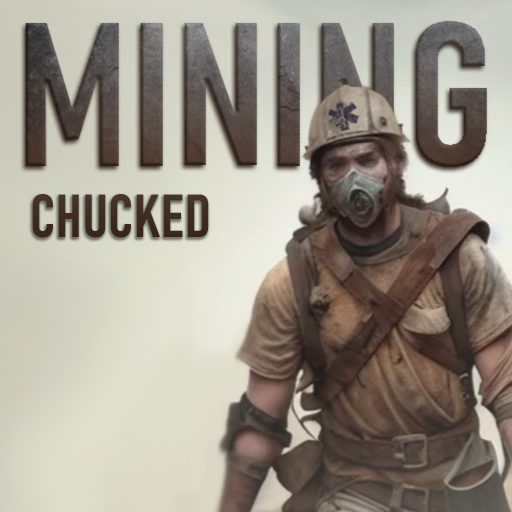
<style>
.page{position:relative;width:512px;height:512px}
.page>*{position:absolute;margin:0}
.t1{font:60px "Bahnschrift-SemiBoldCondensed";letter-spacing:0.025em;font-weight:bold}
.t2{font:200px "Bahnschrift-SemiBoldCondensed";letter-spacing:0.025em;font-weight:bold}
</style>
<div class="page">
<p class="t1" style="left:25px;top:21px;width:461px;height:217px"><span class="t2">MINING<br></span> CHUCKED</p>
</div>
